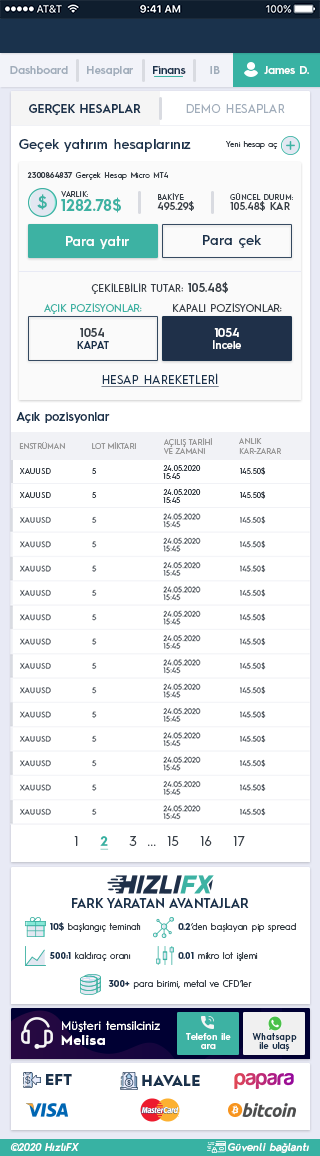
<style>
.page{position:relative;width:320px;height:1156px;background:#ffffff}
.page>*{position:absolute;margin:0}
.t1{font:11.1px "HurmeGeometricSans3-SemiBold";color:#a1adbb}
.t2{font:11.1px "HurmeGeometricSans3-SemiBold";color:#1a324c}
.t3{font:11.1px "HurmeGeometricSans3-SemiBold";color:#fefefe}
.t4{font:11.9px "HurmeGeometricSans1-SemiBold";letter-spacing:0.01em;color:#1a324c}
.t5{font:11.9px "HurmeGeometricSans1-Regular";letter-spacing:0.01em;color:#a1adbb}
.t6{font:13.7px "HurmeGeometricSans3-SemiBold";letter-spacing:0.01em;color:#1a324c}
.t7{font:7.7px "HurmeGeometricSans1-Regular";letter-spacing:0.025em;color:#3a4149}
.t8{font:7.7px "HurmeGeometricSans1-SemiBold";letter-spacing:0.025em;color:#3a4149}
.t9{font:16.8px "HurmeGeometricSans2-SemiBold";letter-spacing:0.01em;color:#3db2a3}
.t10{font:7.7px "HurmeGeometricSans1-Regular";letter-spacing:0.01em;color:#3a4149}
.t11{font:15.4px "HurmeGeometricSans1-Bold";letter-spacing:0.01em;color:#3db2a3}
.t12{font:7.7px/10.2px "HurmeGeometricSans1-Regular";letter-spacing:0.01em;color:#3a4149}
.t13{font:10.2px/10.2px "HurmeGeometricSans1-SemiBold";letter-spacing:0.01em;color:#3a4149}
.t14{font:13.7px "HurmeGeometricSans3-SemiBold";letter-spacing:0.01em;color:#ffffff}
.t15{font:13.7px "HurmeGeometricSans3-SemiBold";letter-spacing:0.025em;color:#1a324c}
.t16{font:10.2px "HurmeGeometricSans1-Regular";letter-spacing:0.01em;color:#3a4149}
.t17{font:11.9px "HurmeGeometricSans1-SemiBold";letter-spacing:0.01em;color:#3a4149}
.t18{font:10.2px "HurmeGeometricSans1-Regular";letter-spacing:0.01em;color:#3db2a3}
.t19{font:10.2px "HurmeGeometricSans3-SemiBold";letter-spacing:0.01em;color:#1a324c}
.t20{font:10.2px "HurmeGeometricSans3-SemiBold";letter-spacing:0.01em;color:#ffffff}
.t21{font:11.9px "HurmeGeometricSans1-SemiBold";letter-spacing:0.01em;color:#ffffff}
.t22{font:11.9px "HurmeGeometricSans1-Regular";letter-spacing:0.01em;color:#1a324c;text-decoration:underline}
.t23{font:11.9px "HurmeGeometricSans3-SemiBold";color:#1a324c}
.t24{font:7.7px "HurmeGeometricSans1-Regular";color:#999999}
.t25{font:7.7px/7.7px "HurmeGeometricSans1-Regular";letter-spacing:0.025em;color:#3a4149}
.t26{font:12.8px "HurmeGeometricSans1-Regular";letter-spacing:0.025em;color:#3a4149}
.t27{font:12.8px "HurmeGeometricSans1-Bold";letter-spacing:0.025em;color:#38b2a3;text-decoration:underline}
.t28{font:12.8px "HurmeGeometricSans1-SemiBold";color:#1a324c}
.t29{font:9px "HurmeGeometricSans1-Regular";color:#3a4149}
.t30{font:9px "HurmeGeometricSans1-Bold";color:#1a324c}
.t31{font:11.9px/15.4px "HurmeGeometricSans1-Regular";letter-spacing:0.025em;color:#ffffff}
.t32{font:13.7px/15.4px "HurmeGeometricSans1-Bold";letter-spacing:0.05em;color:#ffffff}
.t33{font:8.9px/8.9px "HurmeGeometricSans3-SemiBold";letter-spacing:0.01em;color:#ffffff}
.t34{font:8.9px/8.9px "HurmeGeometricSans3-SemiBold";letter-spacing:0.01em;color:#1a324c}
.t35{font:14.5px "HurmeGeometricSans1-Black";letter-spacing:0.025em;color:#1a324c}
.t36{font:10.2px "HurmeGeometricSans2-SemiBoldObl";letter-spacing:0.025em;color:#ffffff}
</style>
<div class="page">
<p class="t1" style="left:10px;top:66px;width:58px;height:8px">Dashboard</p>
<p class="t1" style="left:87px;top:66px;width:46px;height:10px">Hesaplar</p>
<p class="t2" style="left:153px;top:66px;width:33px;height:8px">Finans</p>
<p class="t1" style="left:210px;top:66px;width:10px;height:8px">IB</p>
<p class="t3" style="left:264px;top:66px;width:45px;height:8px">James D.</p>
<p class="t4" style="left:29px;top:104px;width:112px;height:11px">GERÇEK HESAPLAR</p>
<p class="t5" style="left:186px;top:104px;width:99px;height:9px">DEMO HESAPLAR</p>
<p class="t6" style="left:19px;top:139px;width:172px;height:13px">Geçek yatırım hesaplarınız</p>
<p class="t7" style="left:226px;top:141px;width:52px;height:8px">Yeni hesap aç</p>
<p class="t7" style="left:27px;top:172px;width:141px;height:8px"><span class="t8">2300864837</span> Gerçek Hesap Micro MT4</p>
<p class="t9" style="left:37px;top:194px;width:10px;height:16px">$</p>
<p class="t10" style="left:61px;top:191px;width:27px;height:6px">VARLIK:</p>
<p class="t11" style="left:61px;top:197px;width:60px;height:16px">1282.78$</p>
<p class="t12" style="left:157px;top:193px;width:37px;height:18px">BAKİYE:<br><span class="t13">495.29$</span></p>
<p class="t12" style="left:230px;top:193px;width:63px;height:18px">GÜNCEL DURUM:<br><span class="t13">105.48$ KAR</span></p>
<p class="t14" style="left:66px;top:236px;width:63px;height:13px">Para yatır</p>
<p class="t15" style="left:203px;top:235px;width:59px;height:13px">Para çek</p>
<p class="t16" style="left:91px;top:281px;width:137px;height:13px">ÇEKİLEBİLİR TUTAR: <span class="t17">105.48$</span></p>
<p class="t18" style="left:44px;top:303px;width:98px;height:11px">AÇIK POZİSYONLAR:</p>
<p class="t16" style="left:173px;top:303px;width:109px;height:9px">KAPALI POZİSYONLAR:</p>
<p class="t19" style="left:77px;top:328px;width:32px;height:21px;text-align:center"><span class="t17">1054<br></span>KAPAT</p>
<p class="t20" style="left:213px;top:328px;width:28px;height:21px;text-align:center"><span class="t21">1054<br></span>İncele</p>
<p class="t22" style="left:101px;top:373px;width:118px;height:14px">HESAP HAREKETLERİ</p>
<p class="t23" style="left:16px;top:412px;width:94px;height:11px">Açık pozisyonlar</p>
<p class="t24" style="left:164px;top:438px;width:48px;height:16px">AÇILIŞ TARİHİ<br>VE ZAMANI</p>
<p class="t24" style="left:239px;top:438px;width:42px;height:16px">ANLIK<br>KAR-ZARAR</p>
<p class="t24" style="left:19px;top:442px;width:46px;height:7px">ENSTRÜMAN</p>
<p class="t24" style="left:92px;top:442px;width:44px;height:7px">LOT MİKTARI</p>
<p class="t7" style="left:20px;top:468px;width:31px;height:6px">XAUUSD</p>
<p class="t7" style="left:92px;top:468px;width:5px;height:6px">5</p>
<p class="t25" style="left:163px;top:465px;width:38px;height:14px">24.05.2020<br>15:45</p>
<p class="t7" style="left:240px;top:467px;width:26px;height:8px">145.50$</p>
<p class="t7" style="left:20px;top:492px;width:31px;height:6px">XAUUSD</p>
<p class="t7" style="left:92px;top:492px;width:5px;height:6px">5</p>
<p class="t25" style="left:163px;top:489px;width:38px;height:14px">24.05.2020<br>15:45</p>
<p class="t7" style="left:240px;top:491px;width:26px;height:8px">145.50$</p>
<p class="t26" style="left:74px;top:836px;width:171px;height:14px">1    <span class="t27">2</span>    3  ...  15    16    17</p>
<p class="t28" style="left:72px;top:898px;width:177px;height:10px">FARK YARATAN AVANTAJLAR</p>
<p class="t29" style="left:50px;top:922px;width:91px;height:10px"><span class="t30">10$</span> başlangıç teminatı</p>
<p class="t29" style="left:178px;top:923px;width:118px;height:9px"><span class="t30">0.2</span>‘den başlayan pip spread</p>
<p class="t29" style="left:49px;top:952px;width:82px;height:9px"><span class="t30">500:1</span> kaldıraç oranı</p>
<p class="t29" style="left:178px;top:952px;width:80px;height:9px"><span class="t30">0.01</span> mikro lot işlemi</p>
<p class="t29" style="left:108px;top:980px;width:144px;height:9px"><span class="t30">300+</span> para birimi, metal ve CFD’ler</p>
<p class="t31" style="left:61px;top:1021px;width:99px;height:24px">Müşteri temsilciniz<br><span class="t32">Melisa</span></p>
<p class="t33" style="left:186px;top:1033px;width:45px;height:16px;text-align:center">Telefon ile<br>ara</p>
<p class="t34" style="left:252px;top:1033px;width:45px;height:18px;text-align:center">Whatsapp<br>ile ulaş</p>
<p class="t35" style="left:46px;top:1074px;width:26px;height:11px">EFT</p>
<p class="t35" style="left:142px;top:1075px;width:58px;height:11px">HAVALE</p>
<p class="t36" style="left:10px;top:1143px;width:69px;height:8px">©2020 HızlıFX</p>
<p class="t36" style="left:228px;top:1143px;width:81px;height:10px">Güvenli bağlantı</p>
</div>
